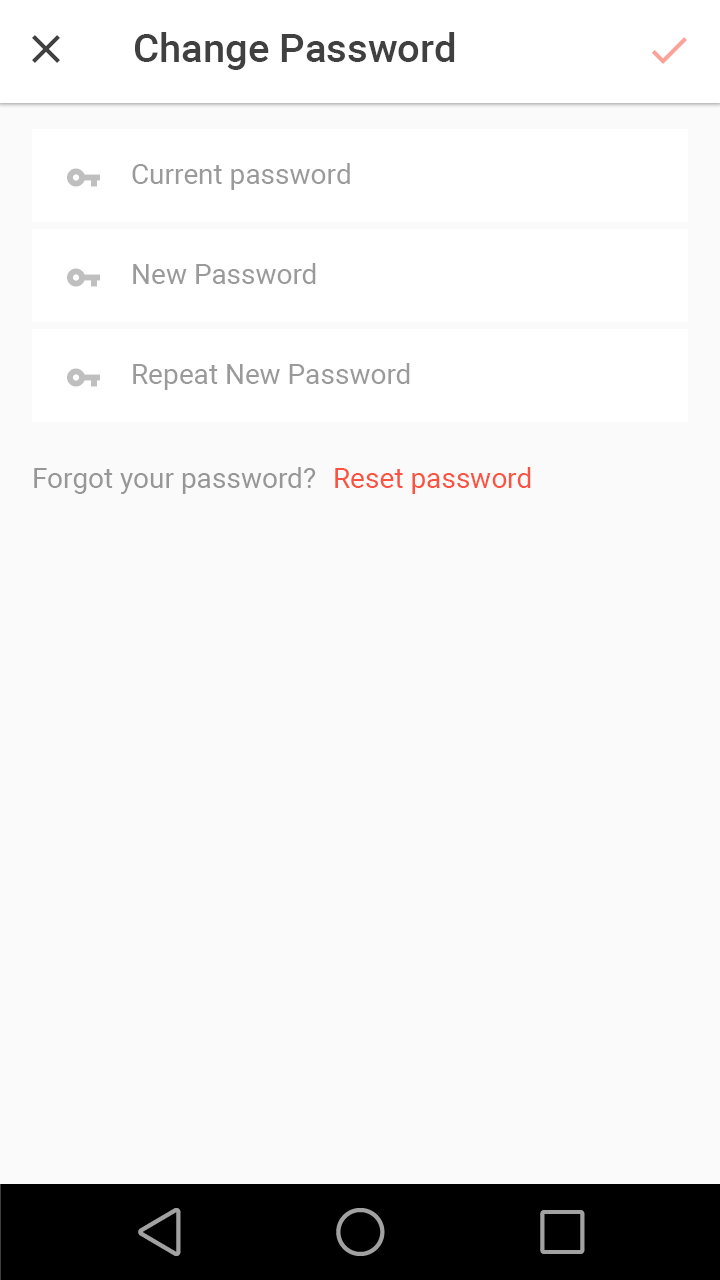
<style>
.page{position:relative;width:720px;height:1280px;background:#fafafa}
.page>*{position:absolute;margin:0}
.t1{font:40px "Roboto-Medium";color:#404040}
.t2{font:28px "Roboto-Regular";color:#9a9a9a}
.t3{font:28px "Roboto-Regular";color:#979797}
.t4{font:28px "Roboto-Regular";color:#fa5342}
</style>
<div class="page">
<p class="t1" style="left:135px;top:32px;width:320px;height:38px">Change Password</p>
<p class="t2" style="left:132px;top:163px;width:218px;height:27px">Current password</p>
<p class="t2" style="left:133px;top:263px;width:183px;height:21px">New Password</p>
<p class="t2" style="left:133px;top:363px;width:277px;height:27px">Repeat New Password</p>
<p class="t3" style="left:34px;top:467px;width:282px;height:27px">Forgot your password?</p>
<p class="t4" style="left:335px;top:467px;width:196px;height:27px">Reset password</p>
</div>
